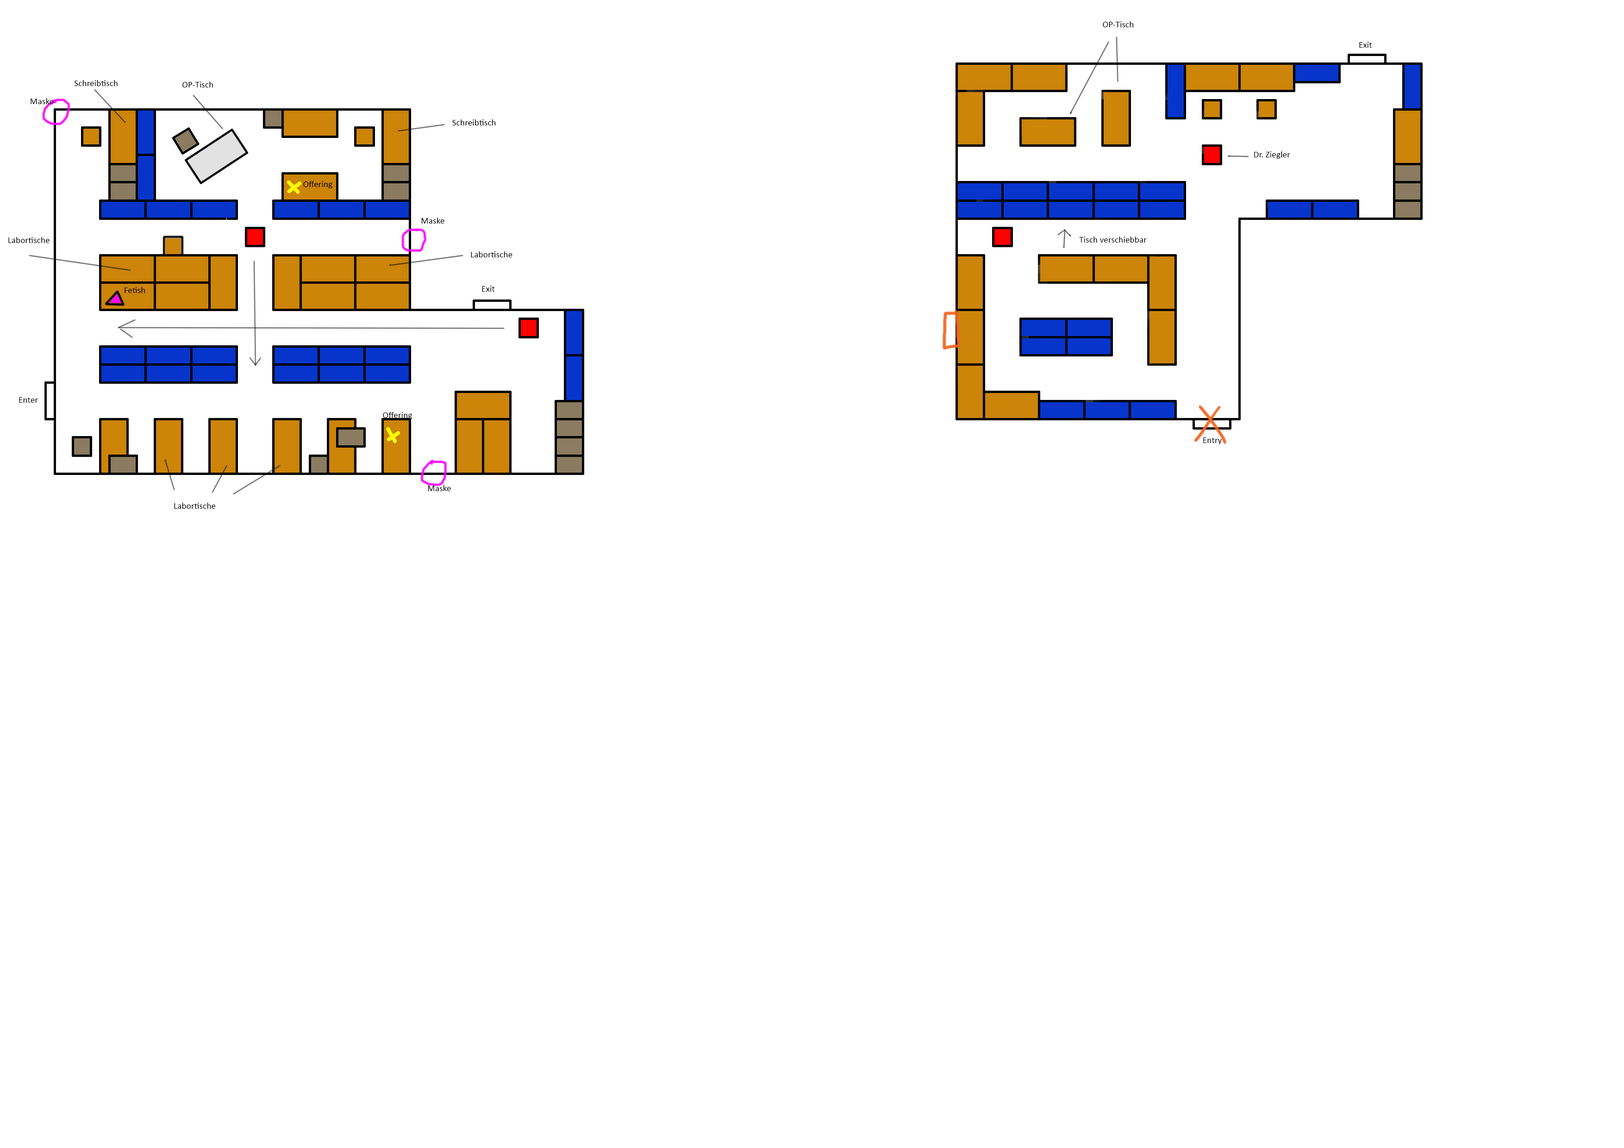
<style>
.page{position:relative;width:1624px;height:1148px;background:#ffffff}
.page>*{position:absolute;margin:0}
.t1{font:9px "Calibri";color:#000000}
</style>
<div class="page">
<p class="t1" style="left:1103px;top:21px;width:31px;height:6px">OP-Tisch</p>
<p class="t1" style="left:1359px;top:42px;width:13px;height:6px">Exit</p>
<p class="t1" style="left:74px;top:80px;width:44px;height:6px">Schreibtisch</p>
<p class="t1" style="left:182px;top:81px;width:31px;height:6px">OP-Tisch</p>
<p class="t1" style="left:31px;top:98px;width:23px;height:6px">Maske</p>
<p class="t1" style="left:452px;top:119px;width:44px;height:6px">Schreibtisch</p>
<p class="t1" style="left:1254px;top:151px;width:36px;height:8px">Dr. Ziegler</p>
<p class="t1" style="left:303px;top:181px;width:29px;height:7px">Offering</p>
<p class="t1" style="left:421px;top:218px;width:23px;height:6px">Maske</p>
<p class="t1" style="left:8px;top:237px;width:42px;height:6px">Labortische</p>
<p class="t1" style="left:1079px;top:237px;width:67px;height:6px">Tisch verschiebbar</p>
<p class="t1" style="left:471px;top:251px;width:41px;height:6px">Labortische</p>
<p class="t1" style="left:125px;top:287px;width:20px;height:6px">Fetish</p>
<p class="t1" style="left:482px;top:286px;width:13px;height:6px">Exit</p>
<p class="t1" style="left:19px;top:397px;width:19px;height:6px">Enter</p>
<p class="t1" style="left:383px;top:412px;width:29px;height:7px">Offering</p>
<p class="t1" style="left:1203px;top:437px;width:18px;height:7px">Entry</p>
<p class="t1" style="left:428px;top:485px;width:23px;height:6px">Maske</p>
<p class="t1" style="left:174px;top:503px;width:42px;height:6px">Labortische</p>
</div>
